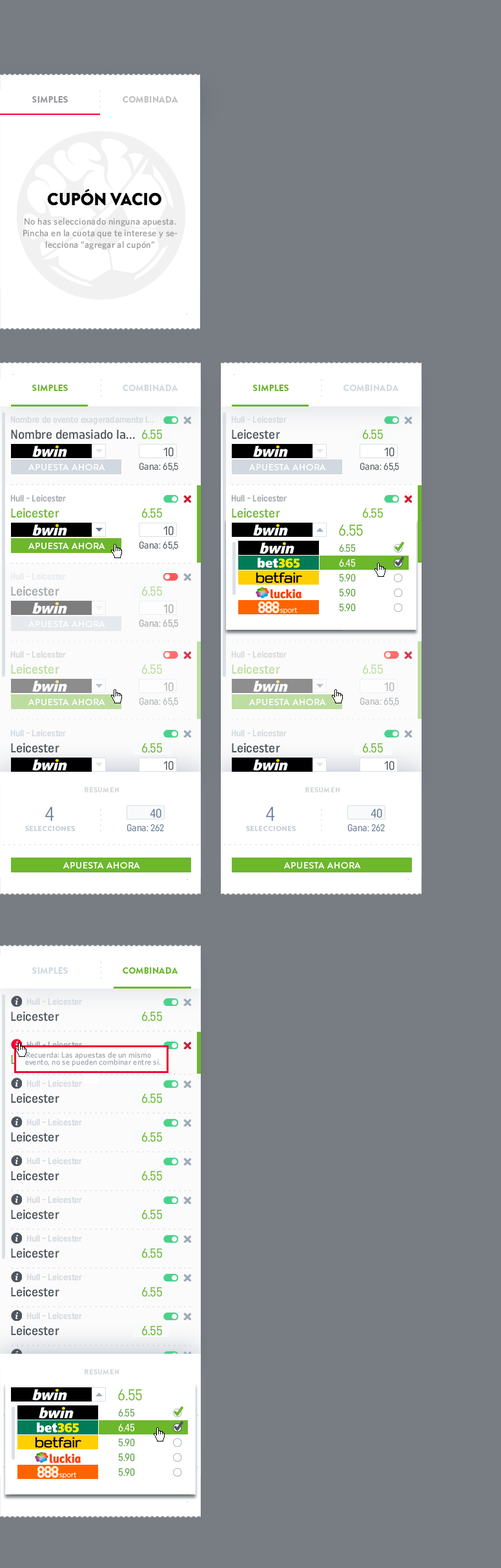
<style>
.page{position:relative;width:501px;height:1568px;background:#787d83}
.page>*{position:absolute;margin:0}
.t1{font:9px "BrandonGrotesque-Black";color:#98999d;text-transform:uppercase}
.t2{font:9px "BrandonGrotesque-Black";color:#bfc0c2;text-transform:uppercase}
.t3{font:16.8px "BrandonGrotesque-Black";color:#000000;text-transform:uppercase}
.t4{font:9px/11.6px "Whitney-Medium";letter-spacing:0.025em;color:#999a9c}
.t5{font:9px "BrandonGrotesque-Black";color:#6db62a;text-transform:uppercase}
.t6{font:9px "BrandonGrotesque-Black";color:#d1d8df;text-transform:uppercase}
.t7{font:9px "UniformCondensed-Medium";color:#d1d8df}
.t8{font:12.9px "UniformCondensed-Medium";color:#4e555d}
.t9{font:12.9px "UniformCondensed";color:#6db72b}
.t10{font:12.3px "UniformCondensed";color:#4e555d}
.t11{font:9px "BrandonGrotesque-Medium";letter-spacing:0.04em;color:#ffffff}
.t12{font:9.7px "UniformCondensed";color:#4e555d}
.t13{font:9px "UniformCondensed-Medium";color:#a1a6ac}
.t14{font:12.9px "UniformCondensed-Medium";color:#6db72b}
.t15{font:15.5px "UniformCondensed";color:#6db72b}
.t16{font:10.3px "UniformCondensed";color:#6db72b}
.t17{font:10.3px "UniformCondensed";color:#ffffff}
.t18{font:7.1px "BrandonGrotesque-Black";letter-spacing:0.04em;color:#d4d8db}
.t19{font:19.9px "UniformCondensed";color:#647994}
.t20{font:12.3px "UniformCondensed";color:#647994}
.t21{font:7.1px "BrandonGrotesque-Black";letter-spacing:0.04em;color:#c6ced7}
.t22{font:9.7px "UniformCondensed";color:#647994}
.t23{font:9px "BrandonGrotesque-Black";color:#6db72b;text-transform:uppercase}
.t24{font:9px "UniformCondensed-Medium"}
.t25{font:7.7px "Whitney-Medium";letter-spacing:0.025em;color:#a1a6ac}
</style>
<div class="page">
<p class="t1" style="left:32px;top:96px;width:36px;height:7px">SIMPLES</p>
<p class="t2" style="left:123px;top:96px;width:55px;height:7px">COMBINADA</p>
<p class="t3" style="left:47px;top:189px;width:114px;height:17px">CUPÓN VACIO</p>
<p class="t4" style="left:23px;top:217px;width:154px;height:33px;text-align:center">No has seleccionado ninguna apuesta. Pincha en la cuota que te interese y selecciona ”agregar al cupón”</p>
<p class="t5" style="left:32px;top:385px;width:36px;height:6px">SIMPLES</p>
<p class="t6" style="left:123px;top:385px;width:55px;height:6px">COMBINADA</p>
<p class="t7" style="left:10px;top:416px;width:144px;height:9px">Nombre de evento exageradamente l...</p>
<p class="t8" style="left:11px;top:429px;width:124px;height:10px">Nombre demasiado la...</p>
<p class="t9" style="left:142px;top:429px;width:20px;height:10px">6.55</p>
<p class="t10" style="left:163px;top:447px;width:11px;height:10px">10</p>
<p class="t11" style="left:28px;top:464px;width:77px;height:6px">APUESTA AHORA</p>
<p class="t12" style="left:139px;top:463px;width:39px;height:9px">Gana: 65,5</p>
<p class="t13" style="left:10px;top:494px;width:56px;height:8px">Hull - Leicester</p>
<p class="t14" style="left:11px;top:508px;width:48px;height:10px">Leicester</p>
<p class="t9" style="left:142px;top:508px;width:20px;height:10px">6.55</p>
<p class="t10" style="left:163px;top:526px;width:11px;height:10px">10</p>
<p class="t15" style="left:339px;top:525px;width:24px;height:11px">6.55</p>
<p class="t11" style="left:28px;top:543px;width:77px;height:6px">APUESTA AHORA</p>
<p class="t12" style="left:139px;top:541px;width:39px;height:9px">Gana: 65,5</p>
<p class="t16" style="left:339px;top:544px;width:17px;height:8px">6.55</p>
<p class="t17" style="left:339px;top:559px;width:17px;height:8px">6.45</p>
<p class="t16" style="left:339px;top:574px;width:17px;height:8px">5.90</p>
<p class="t18" style="left:85px;top:787px;width:34px;height:5px">RESUMEN</p>
<p class="t19" style="left:45px;top:807px;width:9px;height:14px">4</p>
<p class="t20" style="left:150px;top:809px;width:11px;height:9px">40</p>
<p class="t21" style="left:25px;top:826px;width:50px;height:5px">SELECCIONES</p>
<p class="t22" style="left:126px;top:824px;width:38px;height:8px">Gana: 262</p>
<p class="t11" style="left:63px;top:862px;width:77px;height:7px">APUESTA AHORA</p>
<p class="t6" style="left:32px;top:967px;width:36px;height:7px">SIMPLES</p>
<p class="t23" style="left:123px;top:967px;width:55px;height:7px">COMBINADA</p>
<p class="t7" style="left:26px;top:998px;width:56px;height:7px">Hull - Leicester</p>
<p class="t8" style="left:11px;top:1011px;width:48px;height:10px">Leicester</p>
<p class="t9" style="left:142px;top:1011px;width:20px;height:10px">6.55</p>
<p class="t24" style="left:26px;top:1041px;width:56px;height:8px">Hull - Leicester</p>
<p class="t25" style="left:25px;top:1059px;width:136px;height:8px">evento, no se pueden combinar entre sí.</p>
<p class="t25" style="left:26px;top:1052px;width:125px;height:8px">Recuerda: Las apuestas de un mismo</p>
<p class="t18" style="left:85px;top:1369px;width:34px;height:5px">RESUMEN</p>
</div>
